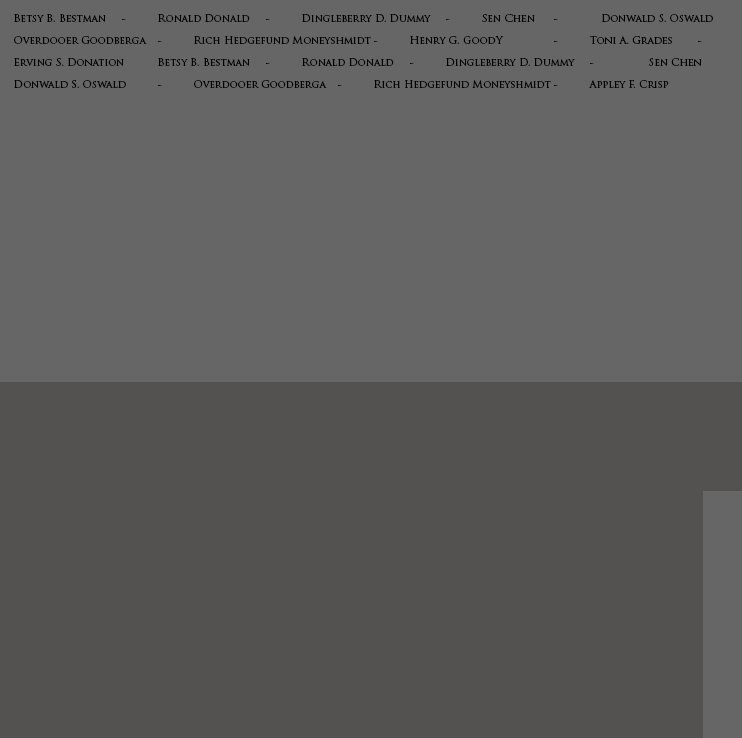
<style>
.page{position:relative;width:742px;height:738px;background:#666666}
.page>*{position:absolute;margin:0}
.t1{font:10px/22px "TrajanPro-Regular";color:#000000}
</style>
<div class="page">
<p class="t1" style="left:14px;top:14px;width:699px;height:74px;text-align:center">Betsy B. Bestman - Ronald Donald - Dingleberry D. Dummy - Sen Chen - Donwald S. Oswald<br>Overdooer Goodberga - Rich Hedgefund Moneyshmidt - Henry G. GoodY  - Toni A. Grades - Erving S. Donation Betsy B. Bestman - Ronald Donald - Dingleberry D. Dummy - Sen Chen<br>Donwald S. Oswald - Overdooer Goodberga - Rich Hedgefund Moneyshmidt - Appley F. Crisp</p>
</div>
